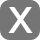
<style>
.page{position:relative;width:40px;height:40px;background:#757575}
.page>*{position:absolute;margin:0}
.t1{font:50px "ArialMT";color:#ffffff}
</style>
<div class="page">
<p class="t1" style="left:8px;top:7px;width:25px;height:26px">x</p>
</div>
